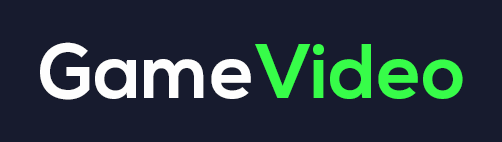
<style>
.page{position:relative;width:502px;height:142px;background:#171b2e}
.page>*{position:absolute;margin:0}
.t1{font:76.8px "NexaBold";color:#37fd49}
.t2{font:76.8px "NexaBold";color:#fefefe}
</style>
<div class="page">
<p class="t1" style="left:40px;top:42px;width:423px;height:58px"><span class="t2">Game</span>Video</p>
</div>
